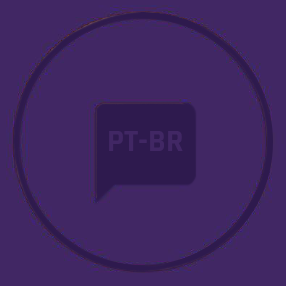
<style>
.page{position:relative;width:286px;height:286px;background:#412764}
.page>*{position:absolute;margin:0}
.t1{font:32px "Rajdhani-Bold";color:#412764}
</style>
<div class="page">
<p class="t1" style="left:109px;top:131px;width:74px;height:20px">PT-BR</p>
</div>
